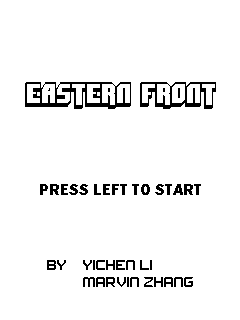
<style>
.page{position:relative;width:240px;height:320px;background:#ffffff}
.page>*{position:absolute;margin:0}
.t1{font:28px "DimitriSwank";color:#000000}
.t2{font:16px "FranklinGothic-Heavy";color:#000000}
.t3{font:14px "FROSTBITENarrow-Regular";color:#000000}
</style>
<div class="page">
<p class="t1" style="left:25px;top:82px;width:191px;height:27px">EASTERN FRONT</p>
<p class="t2" style="left:40px;top:184px;width:161px;height:11px">PRESS LEFT TO START</p>
<p class="t3" style="left:47px;top:260px;width:146px;height:27px">BY YICHEN LI<br> MARVIN ZHANG</p>
</div>
